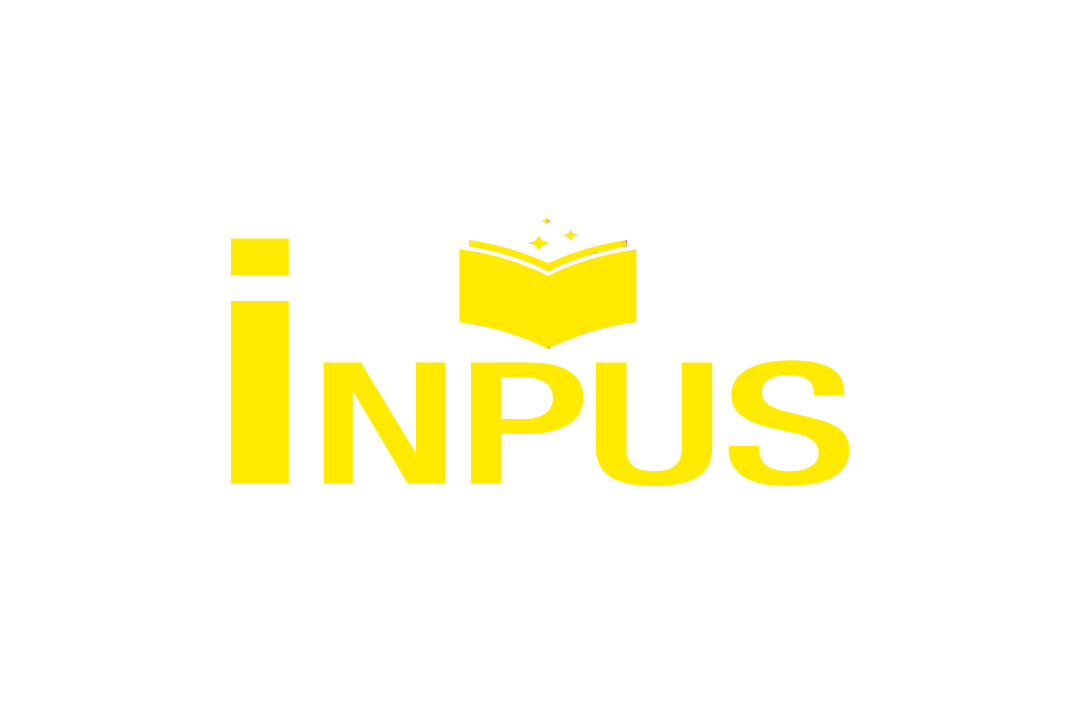
<style>
.page{position:relative;width:1080px;height:720px;background:#ffffff}
.page>*{position:absolute;margin:0}
.t1{font:169.6px "HelveticaNeue-MediumCond";letter-spacing:-0.02em;color:#ffea00;scale:1.57 1}
.t2{font:339.2px "HelveticaNeue-MediumCond";letter-spacing:-0.02em;color:#ffea00;scale:1.57 1}
</style>
<div class="page">
<p class="t1" style="left:231px;top:238px;width:619px;height:248px"><span class="t2">i</span>NPUS</p>
</div>
